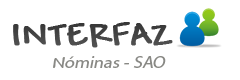
<style>
.page{position:relative;width:240px;height:80px;background:#ffffff}
.page>*{position:absolute;margin:0}
.t1{font:33.3px "Andy-Bold";color:#525252;font-weight:bold;scale:1.09 1}
.t2{font:16.7px "MyriadPro-Regular";color:#898985;font-style:italic;scale:1.09 1}
.t3{font:16.7px "Andy-Bold";color:#898985;font-style:italic;scale:1.09 1}
</style>
<div class="page">
<p class="t1" style="left:13px;top:22px;width:160px;height:26px">INTERFAZ</p>
<p class="t2" style="left:53px;top:56px;width:113px;height:12px"><span class="t3">N</span>óminas - SAO</p>
</div>
